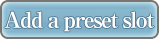
<style>
.page{position:relative;width:159px;height:39px}
.page>*{position:absolute;margin:0}
.t1{font:22px "RyuminPro-ExBold";letter-spacing:-0.08em;color:#ffffff}
</style>
<div class="page">
<p class="t1" style="left:4px;top:11px;width:151px;height:21px">Add a preset slot</p>
</div>
